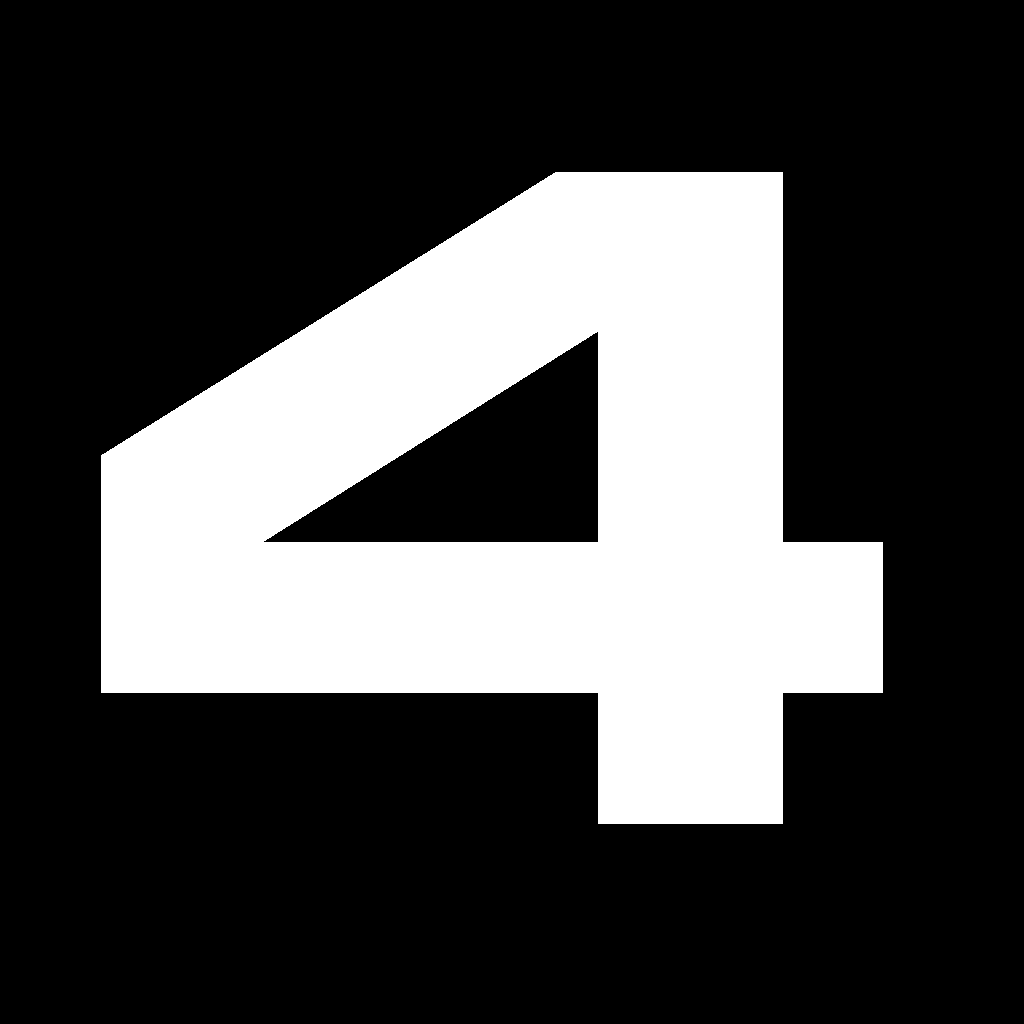
<style>
.page{position:relative;width:1024px;height:1024px;background:#000000}
.page>*{position:absolute;margin:0}
.t1{font:895.8px "Square721BT-BoldExtended";color:#ffffff}
</style>
<div class="page">
<p class="t1" style="left:101px;top:172px;width:782px;height:652px">4</p>
</div>
